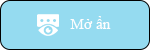
<style>
.page{position:relative;width:150px;height:50px;background:#95dbf0}
.page>*{position:absolute;margin:0}
.t1{font:15.3px "TimesNewRomanPSMT";color:#fefefe}
</style>
<div class="page">
<p class="t1" style="left:70px;top:16px;width:41px;height:13px">Mở ẩn</p>
</div>
